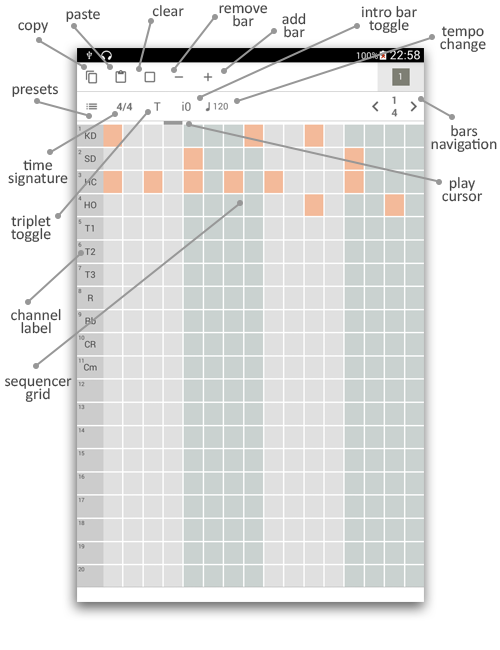
<style>
.page{position:relative;width:500px;height:650px;background:#ffffff}
.page>*{position:absolute;margin:0}
.t1{font:15.9px "Calibri";color:#454545}
.t2{font:15.9px/13.2px "Calibri";color:#454545}
</style>
<div class="page">
<p class="t1" style="left:152px;top:4px;width:32px;height:13px">clear</p>
<p class="t2" style="left:219px;top:5px;width:49px;height:22px;text-align:center">remove<br>bar</p>
<p class="t2" style="left:361px;top:5px;width:56px;height:28px;text-align:center">intro bar<br>toggle</p>
<p class="t1" style="left:66px;top:9px;width:34px;height:13px">paste</p>
<p class="t2" style="left:282px;top:13px;width:24px;height:25px;text-align:center">add<br>bar</p>
<p class="t1" style="left:18px;top:22px;width:31px;height:11px">copy</p>
<p class="t2" style="left:440px;top:26px;width:46px;height:26px;text-align:center">tempo<br>change</p>
<p class="t1" style="left:12px;top:84px;width:46px;height:13px">presets</p>
<p class="t2" style="left:431px;top:125px;width:66px;height:27px;text-align:center">bars<br>navigation</p>
<p class="t2" style="left:8px;top:159px;width:60px;height:27px;text-align:center">time<br>signature</p>
<p class="t2" style="left:442px;top:176px;width:41px;height:26px;text-align:center">play<br>cursor</p>
<p class="t2" style="left:11px;top:214px;width:40px;height:28px;text-align:center">triplet<br>toggle</p>
<p class="t2" style="left:11px;top:308px;width:50px;height:26px;text-align:center">channel<br>label</p>
<p class="t2" style="left:5px;top:378px;width:67px;height:24px;text-align:center">sequencer<br>grid</p>
</div>
